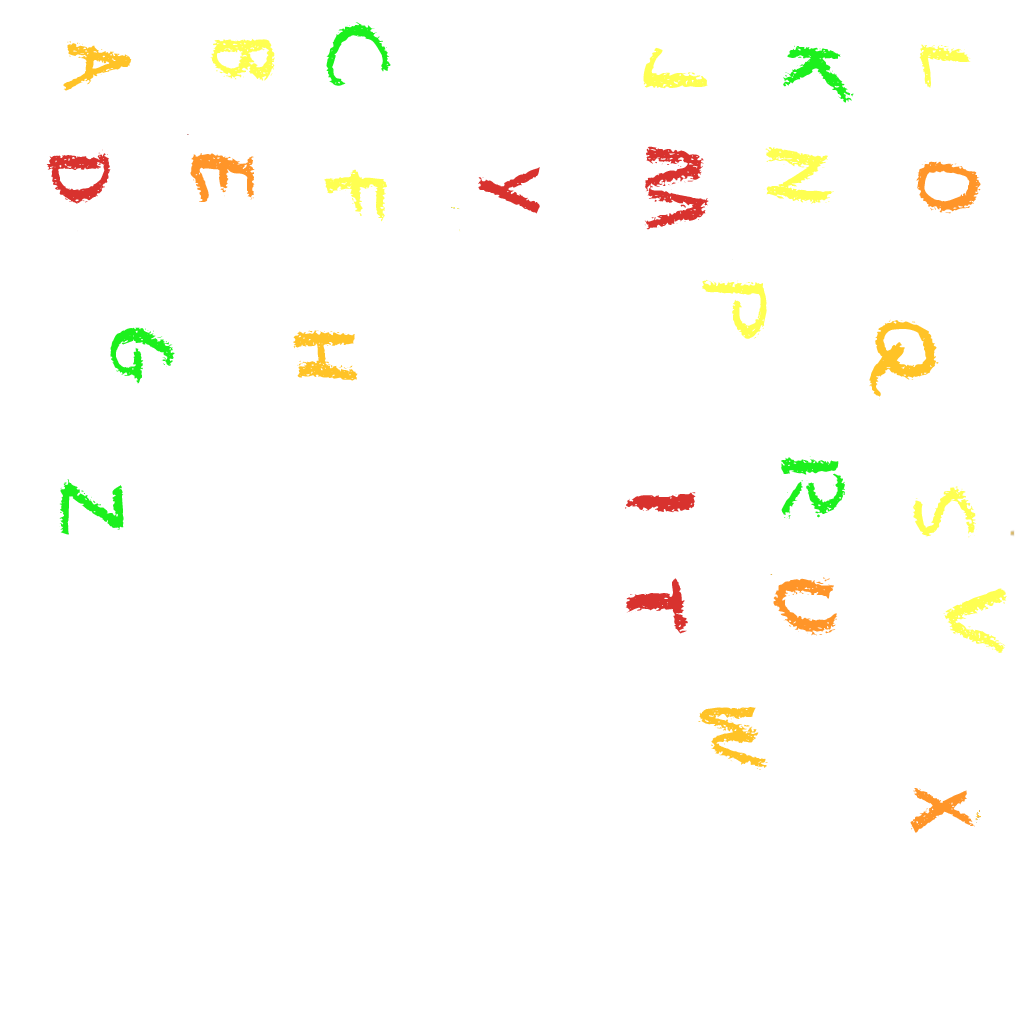
<style>
.page{position:relative;width:1024px;height:1024px;background:#ffffff}
.page>*{position:absolute;margin:0}
.t1{font:80px "Eraser-Regular";color:#1cf01d}
.t2{font:80px "Eraser-Regular";color:#ffc327}
.t3{font:80px "Eraser-Regular";color:#feff51}
.t4{font:80px "Eraser-Regular";color:#d8322e}
.t5{font:80px "Eraser-Regular";color:#ff9529}
</style>
<div class="page">
<p class="t1" style="left:326px;top:22px;width:65px;height:64px;rotate:90deg">C</p>
<p class="t2" style="left:63px;top:41px;width:69px;height:50px;rotate:89deg">A</p>
<p class="t3" style="left:210px;top:38px;width:65px;height:43px;rotate:89deg">B</p>
<p class="t3" style="left:643px;top:47px;width:65px;height:42px;rotate:90deg">J</p>
<p class="t1" style="left:783px;top:45px;width:71px;height:58px;rotate:90deg">k</p>
<p class="t3" style="left:919px;top:44px;width:52px;height:44px;rotate:90deg">L</p>
<p class="t4" style="left:46px;top:149px;width:65px;height:55px;rotate:90deg">D</p>
<p class="t4" style="left:644px;top:146px;width:65px;height:84px;rotate:90deg">M</p>
<p class="t3" style="left:763px;top:147px;width:71px;height:57px;rotate:90deg">N</p>
<p class="t5" style="left:190px;top:153px;width:65px;height:49px;rotate:90deg">E</p>
<p class="t5" style="left:916px;top:161px;width:65px;height:53px;rotate:90deg">O</p>
<p class="t3" style="left:324px;top:169px;width:63px;height:54px;rotate:88deg">F</p>
<p class="t4" style="left:478px;top:167px;width:62px;height:47px;rotate:90deg">Y</p>
<p class="t3" style="left:702px;top:279px;width:65px;height:60px;rotate:90deg">P</p>
<p class="t1" style="left:110px;top:327px;width:65px;height:57px;rotate:90deg">G</p>
<p class="t2" style="left:869px;top:319px;width:70px;height:81px;rotate:89deg">Q</p>
<p class="t2" style="left:293px;top:330px;width:65px;height:51px;rotate:90deg">H</p>
<p class="t1" style="left:781px;top:456px;width:64px;height:63px;rotate:88deg">R</p>
<p class="t1" style="left:59px;top:479px;width:65px;height:56px;rotate:91deg">Z</p>
<p class="t3" style="left:913px;top:486px;width:64px;height:52px;rotate:90deg">S</p>
<p class="t4" style="left:625px;top:492px;width:71px;height:21px;rotate:90deg">I</p>
<p class="t4" style="left:625px;top:578px;width:63px;height:56px;rotate:89deg">T</p>
<p class="t5" style="left:773px;top:577px;width:65px;height:59px;rotate:90deg">U</p>
<p class="t3" style="left:942px;top:588px;width:65px;height:65px;rotate:91deg">V</p>
<p class="t2" style="left:698px;top:707px;width:70px;height:63px;rotate:90deg">W</p>
<p class="t5" style="left:910px;top:788px;width:65px;height:45px;rotate:89deg">X</p>
</div>
